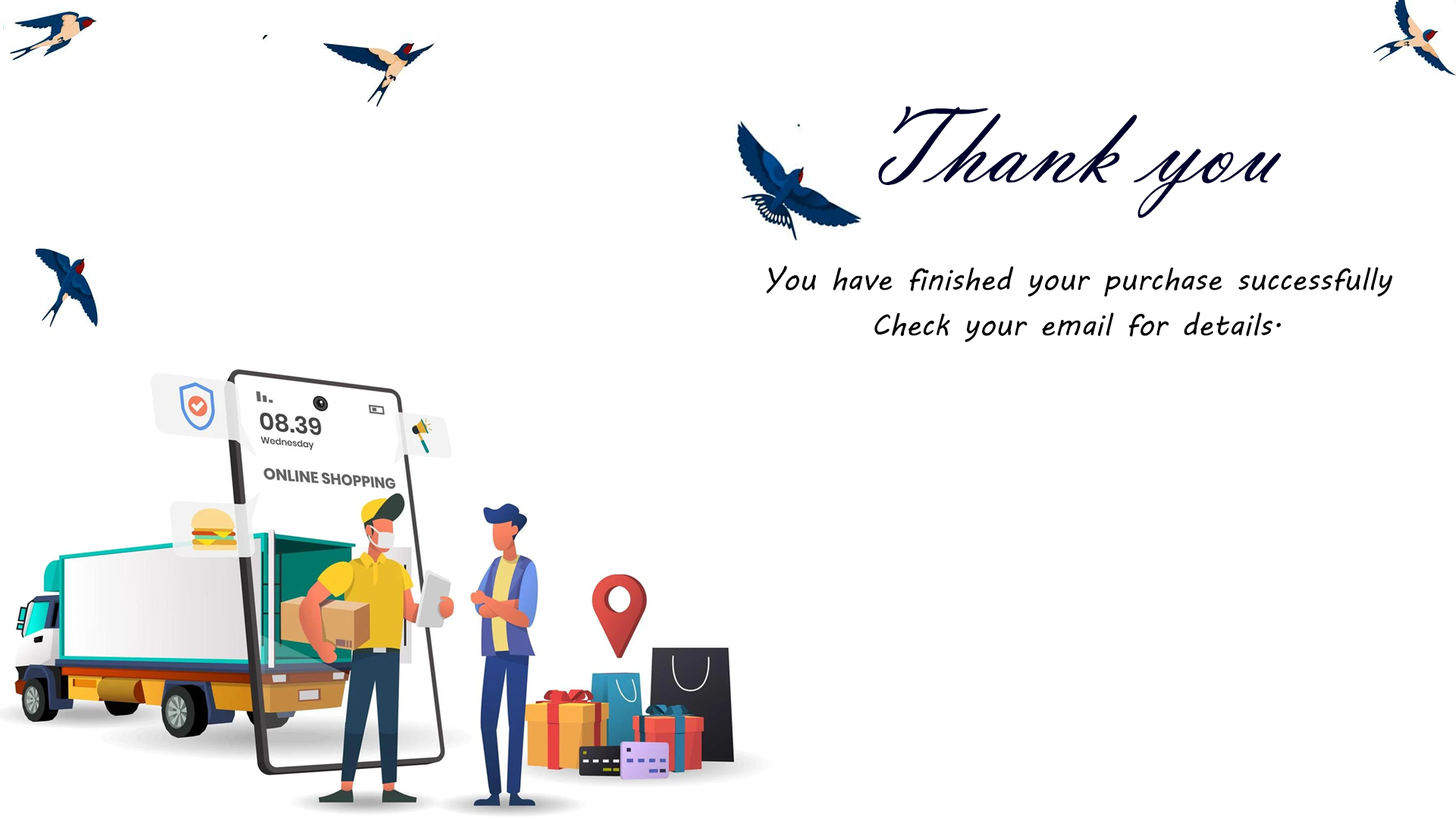
<style>
.page{position:relative;width:1456px;height:819px;background:#ffffff}
.page>*{position:absolute;margin:0}
.t1{font:113.7px "VladimirScript";color:#00002d}
.t2{font:30.3px/22.7px "MVBoli";color:#000000}
</style>
<div class="page">
<p class="t1" style="left:878px;top:106px;width:404px;height:112px">Thank you</p>
<p class="t2" style="left:766px;top:265px;width:626px;height:77px;text-align:center">You have finished your purchase successfully<br><br>Check your email for details.</p>
</div>
